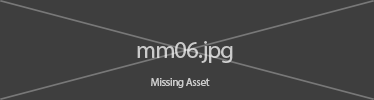
<style>
.page{position:relative;width:374px;height:100px;background:#3e3e3e}
.page>*{position:absolute;margin:0}
.t1{font:24px "MyriadPro-Regular";letter-spacing:-0.025em;color:#cbcbcb}
.t2{font:11px "MyriadPro-Regular";letter-spacing:-0.025em;color:#cbcbcb}
</style>
<div class="page">
<p class="t1" style="left:137px;top:41px;width:96px;height:22px">mm06.jpg</p>
<p class="t2" style="left:151px;top:78px;width:59px;height:10px">Missing Asset</p>
</div>
